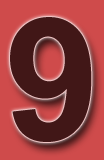
<style>
.page{position:relative;width:104px;height:160px;background:#411717}
.page>*{position:absolute;margin:0}
.t1{font:170px "Arial-BoldMT";letter-spacing:0.11em;color:#411717}
</style>
<div class="page">
<p class="t1" style="left:10px;top:17px;width:82px;height:125px">9</p>
</div>
